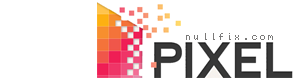
<style>
.page{position:relative;width:294px;height:79px;background:#ffffff}
.page>*{position:absolute;margin:0}
.t1{font:10px "Terminal";letter-spacing:0.22em;color:#7a7978}
</style>
<div class="page">
<p class="t1" style="left:186px;top:33px;width:87px;height:7px">nullfix.com</p>
</div>
